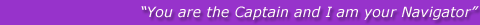
<style>
.page{position:relative;width:480px;height:25px;background:#9733cb}
.page>*{position:absolute;margin:0}
.t1{font:14px "Verdana-Italic";letter-spacing:0.01em;color:#fffdf9}
</style>
<div class="page">
<p class="t1" style="left:141px;top:6px;width:338px;height:14px">“You are the Captain and I am your Navigator”</p>
</div>
